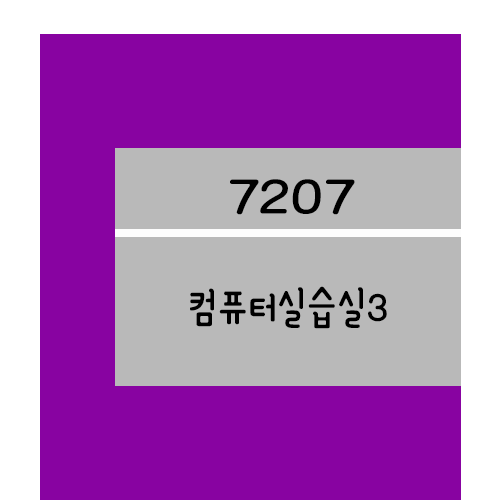
<style>
.page{position:relative;width:500px;height:500px;background:#8803a1}
.page>*{position:absolute;margin:0}
.t1{font:61.2px "YanoljaYacheR";color:#000000;scale:1.18 1}
.t2{font:48px "YanoljaYacheR";color:#000000}
</style>
<div class="page">
<p class="t1" style="left:230px;top:179px;width:125px;height:36px">7207</p>
<p class="t2" style="left:190px;top:286px;width:197px;height:43px">컴퓨터실습실3</p>
</div>
